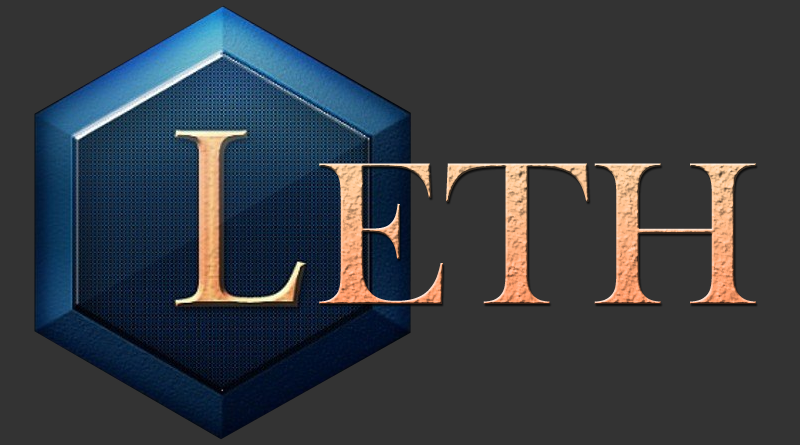
<style>
.page{position:relative;width:800px;height:445px;background:#333333}
.page>*{position:absolute;margin:0}
.t1{font:210.5px "BaskOldFace"}
</style>
<div class="page">
<p class="t1" style="left:319px;top:163px;width:437px;height:141px">ETH</p>
</div>
